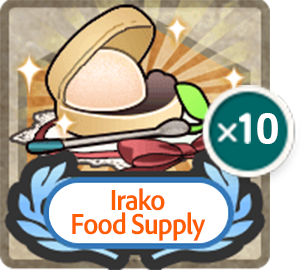
<style>
.page{position:relative;width:301px;height:270px}
.page>*{position:absolute;margin:0}
.t1{font:30px/24px "AdobeClean-Bold";letter-spacing:-0.04em;color:#ff5d00;scale:0.9 1}
</style>
<div class="page">
<p class="t1" style="left:72px;top:188px;width:133px;height:53px;text-align:center">Irako<br>Food Supply</p>
</div>
